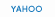
<style>
.page{position:relative;width:55px;height:17px;background:#fdfdfd}
.page>*{position:absolute;margin:0}
.t1{font:8.7px "Syntax-Bold";color:#1879bc}
</style>
<div class="page">
<p class="t1" style="left:11px;top:5px;width:31px;height:7px">YAHOO</p>
</div>
